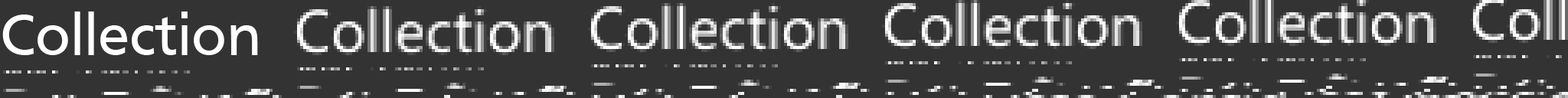
<style>
.page{position:relative;width:1568px;height:98px;background:#333333}
.page>*{position:absolute;margin:0}
.t1{font:60.6px "Frutiger";color:#ffffff}
</style>
<div class="page">
<p class="t1" style="left:2px;top:11px;width:256px;height:44px">Collection</p>
</div>
